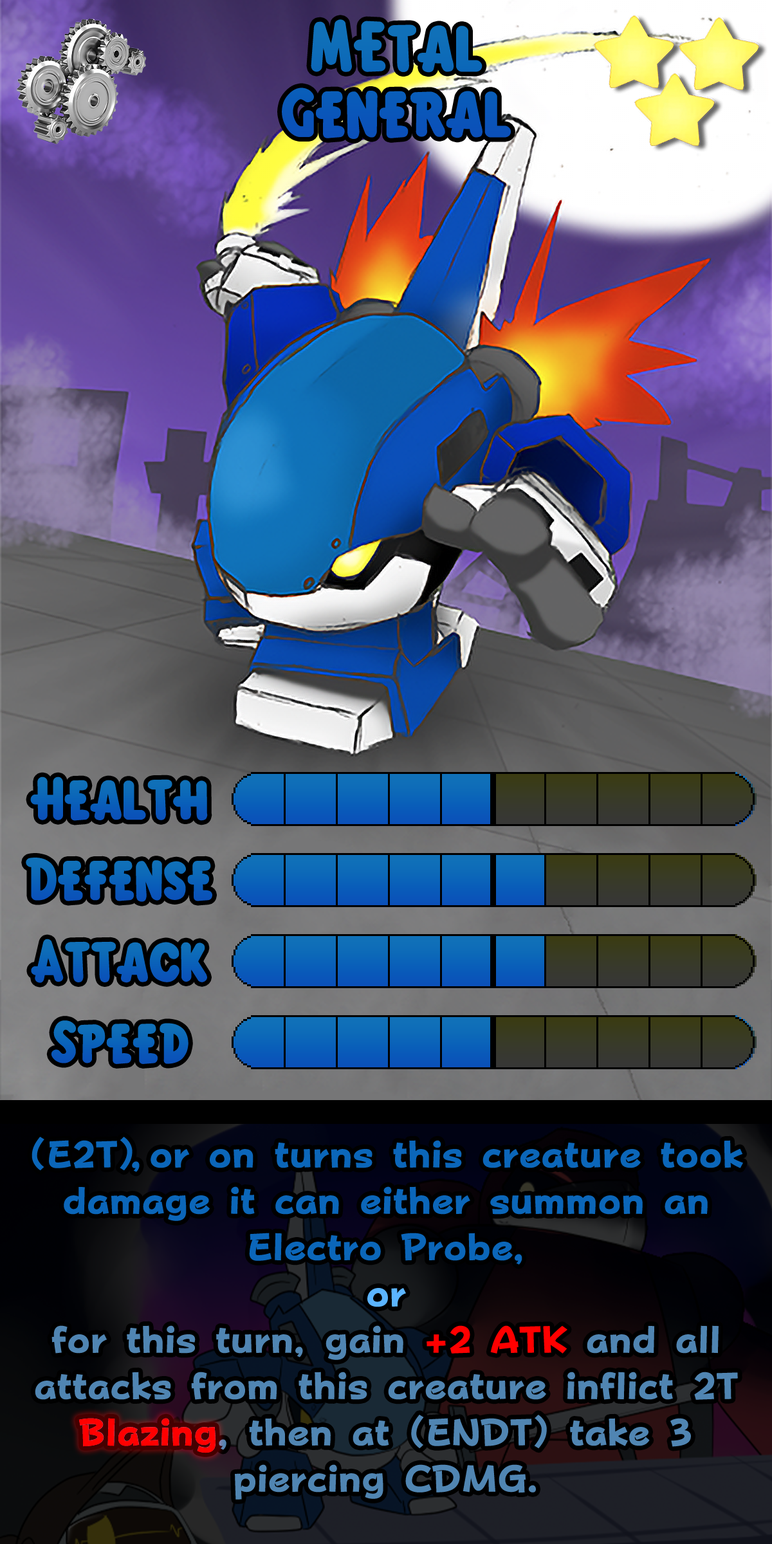
<style>
.page{position:relative;width:772px;height:1544px}
.page>*{position:absolute;margin:0}
.t1{font:108.1px/65.6px "KirbyClassic";color:#0b5bb9}
.t2{font:92.7px "KirbyClassic";color:#0a61b9}
.t3{font:92.7px "KirbyClassic";color:#0b63b9}
.t4{font:64.3px/46.3px "FOTPopHappinessStrp-ExtraBold";color:#5085b2}
.t5{font:64.3px/46.3px "FOTPopHappinessStrp-ExtraBold";color:#0b66b9}
.t6{font:64.3px/46.3px "FOTPopHappinessStrp-ExtraBold";letter-spacing:-0.32em;color:#0b66b9}
.t7{font:64.3px/46.3px "FOTPopHappinessStrp-ExtraBold";color:#5bb4ff}
.t8{font:64.3px/46.3px "FOTPopHappinessStrp-ExtraBold";color:#ff0000}
.t9{font:64.9px "FOTPopHappinessStrp-ExtraBold";color:#ff0000}
</style>
<div class="page">
<p class="t1" style="left:282px;top:19px;width:229px;height:120px;text-align:center">MEtal<br>General</p>
<p class="t2" style="left:30px;top:777px;width:178px;height:44px">Health</p>
<p class="t3" style="left:26px;top:858px;width:186px;height:44px">Defense</p>
<p class="t2" style="left:31px;top:939px;width:176px;height:44px">Attack</p>
<p class="t3" style="left:51px;top:1021px;width:138px;height:43px">Speed</p>
<p class="t4" style="left:32px;top:1137px;width:711px;height:363px;text-align:center"><span class="t5">(E2T</span><span class="t6">) ,</span><span class="t5"> or on turns this creature took damage it can either summon an Electro Probe,<br></span><span class="t7">or</span><br>for this turn, gain <span class="t8">+2 ATK</span> and all attacks from this creature inflict 2T Blazing, then at (ENDT) take 3 piercing CDMG.</p>
<p class="t9" style="left:79px;top:1418px;width:137px;height:36px">Blazing</p>
</div>
